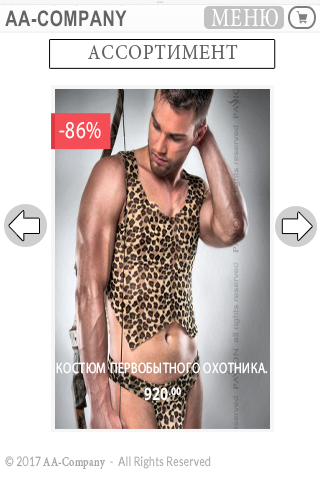
<style>
.page{position:relative;width:320px;height:480px;background:#ffffff}
.page>*{position:absolute;margin:0}
.t1{font:21.4px "Arial-BoldMT";letter-spacing:0.03em;color:#656363;text-transform:uppercase;scale:0.79 1}
.t2{font:26.1px "MinionPro-Regular";letter-spacing:0.03em;color:#ffffff;scale:0.79 1}
.t3{font:20.4px "MinionPro-Regular";letter-spacing:0.05em;color:#656363;text-transform:uppercase;scale:0.91 1}
.t4{font:24.2px "MyriadPro-Regular";letter-spacing:0.03em;color:#ffffff;scale:0.79 1}
.t5{font:15.1px "MyriadPro-Regular";letter-spacing:0.04em;color:#ffffff;text-transform:uppercase;scale:0.79 1}
.t6{font:17px "OpenSans-Bold";letter-spacing:0.04em;color:#ffffff;text-transform:uppercase;scale:0.79 1}
.t7{font:17.9px "OpenSans-Bold";letter-spacing:0.04em;color:#ffffff;text-transform:uppercase;scale:0.79 1}
.t8{font:13px "Lato-Regular";letter-spacing:0.03em;color:#a6a6a6;scale:0.79 1}
.t9{font:13px "MinionPro-Regular";letter-spacing:0.03em;color:#a6a6a6;scale:0.79 1}
</style>
<div class="page">
<p class="t1" style="left:5px;top:10px;width:122px;height:17px">AA-COMPANY</p>
<p class="t2" style="left:211px;top:8px;width:67px;height:19px">МЕНЮ</p>
<p class="t3" style="left:88px;top:44px;width:150px;height:15px">ассортимент</p>
<p class="t4" style="left:59px;top:122px;width:42px;height:17px">-86%</p>
<p class="t5" style="left:56px;top:362px;width:212px;height:12px">Костюм первобытного охотника.</p>
<p class="t6" style="left:144px;top:387px;width:37px;height:14px">920<span class="t7">.00</span></p>
<p class="t8" style="left:5px;top:456px;width:206px;height:13px">© 2017 <span class="t9">AA-Company</span>  -  All Rights Reserved</p>
</div>
